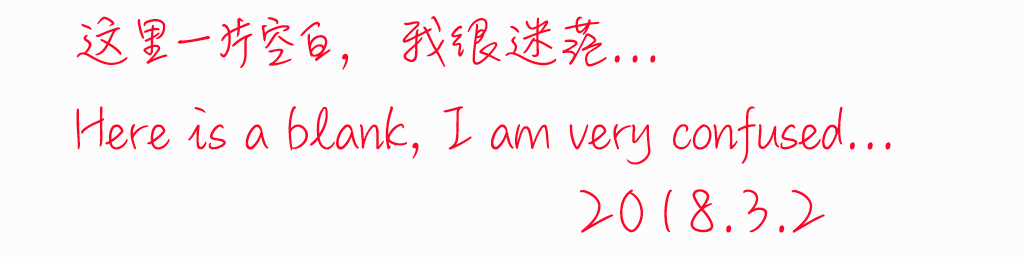
<style>
.page{position:relative;width:1024px;height:257px;background:#fdfcfc}
.page>*{position:absolute;margin:0}
.t1{font:64px "MLingWaiMedium-SC";color:#fa082a}
</style>
<div class="page">
<p class="t1" style="left:76px;top:15px;width:815px;height:150px">这里一片空白，我很迷茫...<br>Here is a blank, I am very confused...</p>
<p class="t1" style="left:580px;top:189px;width:245px;height:44px">2018.3.2</p>
</div>
